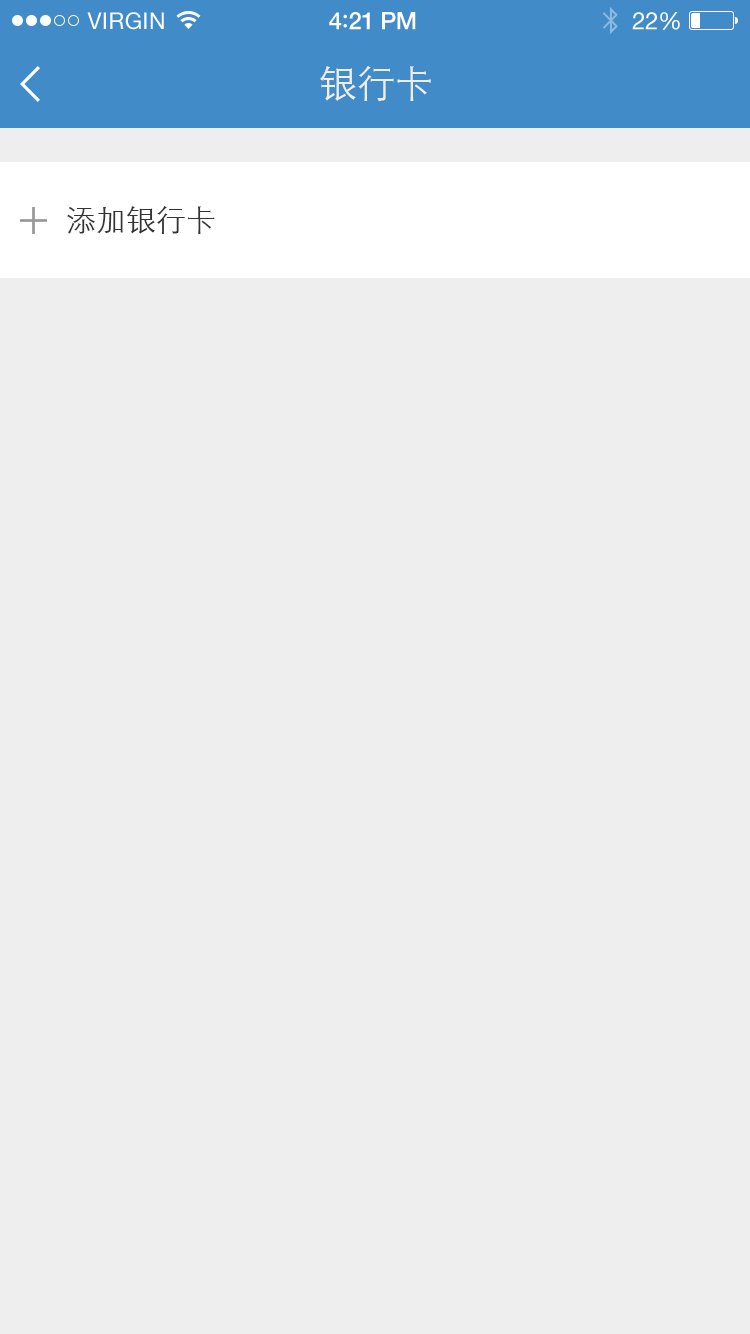
<style>
.page{position:relative;width:750px;height:1334px;background:#eeeeee}
.page>*{position:absolute;margin:0}
.t1{font:23px "HelveticaNeue";letter-spacing:0.02em;color:#ffffff}
.t2{font:24px "HelveticaNeue-Medium";letter-spacing:-0.02em;color:#ffffff}
.t3{font:26px "Avenir-Medium";letter-spacing:-0.02em;color:#ffffff}
.t4{font:24px "HelveticaNeue";letter-spacing:-0.02em;color:#ffffff}
.t5{font:38px "STXihei";color:#eeeeee}
.t6{font:30px "STXihei";color:#333333}
</style>
<div class="page">
<p class="t1" style="left:87px;top:12px;width:77px;height:18px">VIRGIN</p>
<p class="t2" style="left:329px;top:12px;width:87px;height:18px">4<span class="t3">:</span>21 PM</p>
<p class="t4" style="left:632px;top:12px;width:48px;height:18px">22%</p>
<p class="t5" style="left:320px;top:66px;width:111px;height:35px">银行卡</p>
<p class="t6" style="left:67px;top:206px;width:148px;height:28px">添加银行卡</p>
</div>
